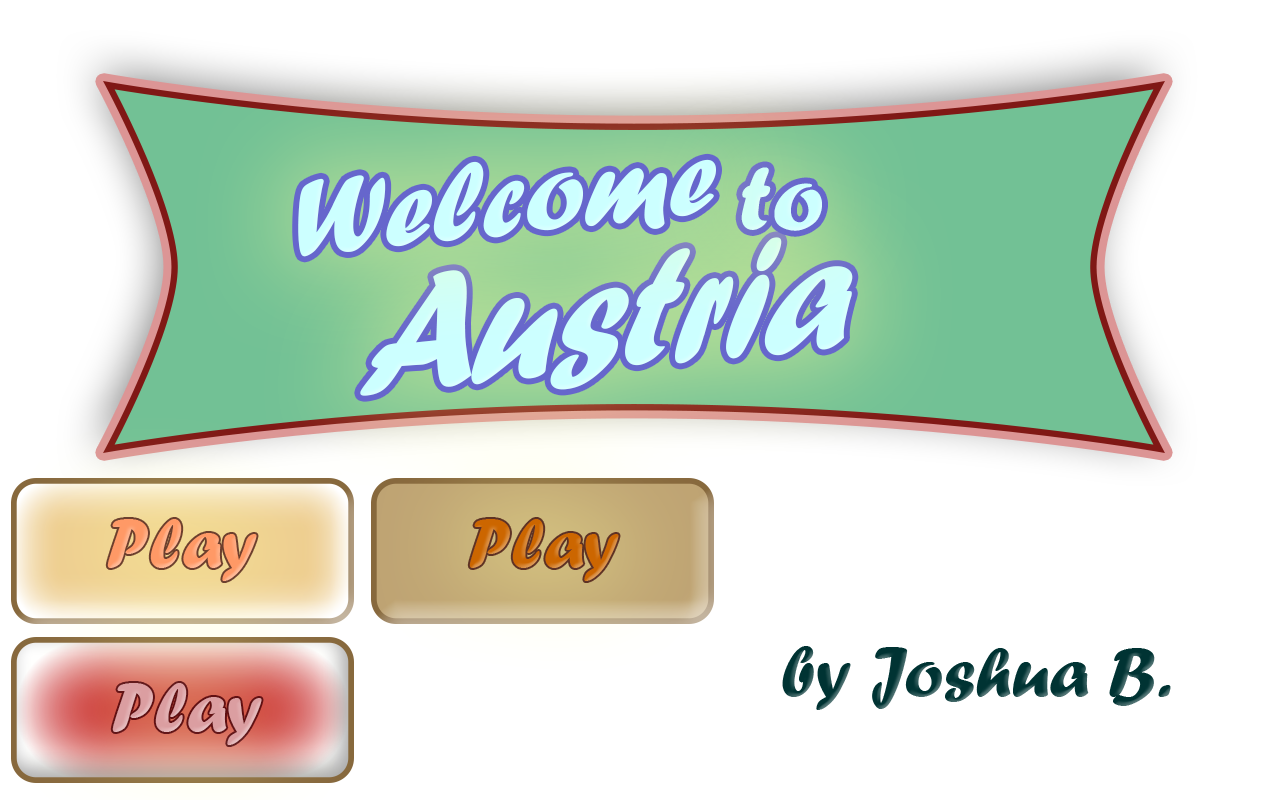
<style>
.page{position:relative;width:1280px;height:800px;background:#ffffff}
.page>*{position:absolute;margin:0}
.t1{font:114.3px "ForteMT";color:#ccffff}
.t2{font:95.8px "ForteMT";color:#ccffff}
.t3{font:180.3px "ForteMT";color:#ccffff;scale:0.86 1}
.t4{font:72px "ForteMT";color:#ff9966}
.t5{font:72px "ForteMT";color:#cc6600}
.t6{font:72px "ForteMT";color:#003333}
.t7{font:72px "ForteMT";color:#db9ea1}
</style>
<div class="page">
<p class="t1" style="left:298px;top:159px;width:418px;height:98px;rotate:-6deg">Welcome</p>
<p class="t2" style="left:741px;top:167px;width:81px;height:64px;rotate:-1deg">to</p>
<p class="t3" style="left:360px;top:237px;width:493px;height:159px;rotate:-6deg">Austria</p>
<p class="t4" style="left:107px;top:519px;width:150px;height:62px">Play</p>
<p class="t5" style="left:469px;top:519px;width:150px;height:62px">Play</p>
<p class="t6" style="left:782px;top:646px;width:389px;height:64px">by Joshua B.</p>
<p class="t7" style="left:112px;top:683px;width:150px;height:62px">Play</p>
</div>
